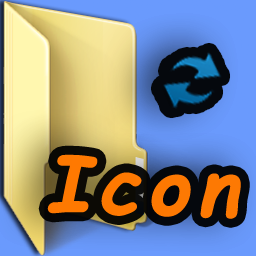
<style>
.page{position:relative;width:256px;height:256px}
.page>*{position:absolute;margin:0}
.t1{font:77.8px "ComicSansMS-Bold";letter-spacing:0.09em;color:#ff7800;font-weight:bold;font-style:italic}
</style>
<div class="page">
<p class="t1" style="left:47px;top:154px;width:194px;height:65px;rotate:1deg">Icon</p>
</div>
